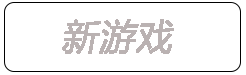
<style>
.page{position:relative;width:246px;height:75px;background:#ffffff}
.page>*{position:absolute;margin:0}
.t1{font:36px "MicrosoftYaHei";color:#bab2b2;font-weight:bold;font-style:italic}
</style>
<div class="page">
<p class="t1" style="left:62px;top:19px;width:112px;height:35px">新游戏</p>
</div>
